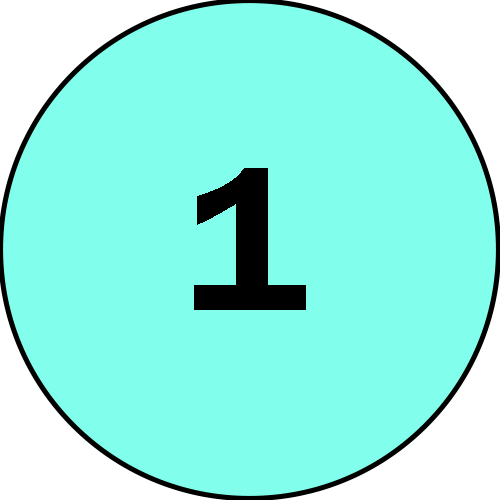
<style>
.page{position:relative;width:500px;height:500px;background:#82ffec}
.page>*{position:absolute;margin:0}
.t1{font:208.3px "FranklinGothic-Demi";color:#000000}
</style>
<div class="page">
<p class="t1" style="left:194px;top:168px;width:112px;height:142px">1</p>
</div>
